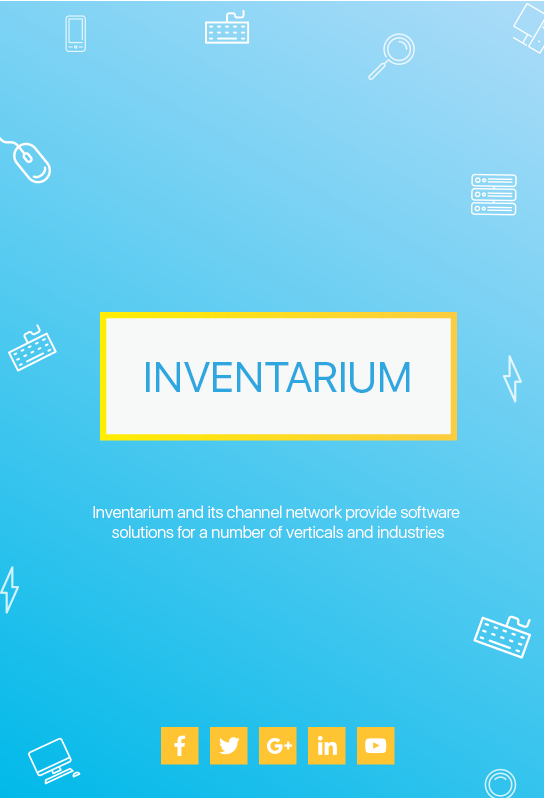
<style>
.page{position:relative;width:544px;height:798px}
.page>*{position:absolute;margin:0}
.t1{font:42.9px "SFUIDisplay-Regular";color:#2ea7e0;text-transform:uppercase}
.t2{font:16.4px "SFUIDisplay-Light";color:#ffffff}
</style>
<div class="page">
<p class="t1" style="left:146px;top:362px;width:264px;height:31px">inventarium</p>
<p class="t2" style="left:93px;top:505px;width:367px;height:33px;text-align:center">Inventarium and its channel network provide software <br>solutions for a number of verticals and industries</p>
</div>
